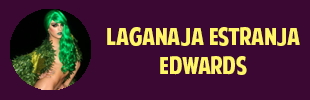
<style>
.page{position:relative;width:310px;height:100px;background:#3b0833}
.page>*{position:absolute;margin:0}
.t1{font:24px "AmericanPurpose";color:#fff568}
.t2{font:24px "Tahoma";color:#ffffff}
</style>
<div class="page">
<p class="t1" style="left:107px;top:27px;width:193px;height:48px;text-align:center"><span class="t2"><br></span>Laganaja Estranja Edwards</p>
</div>
